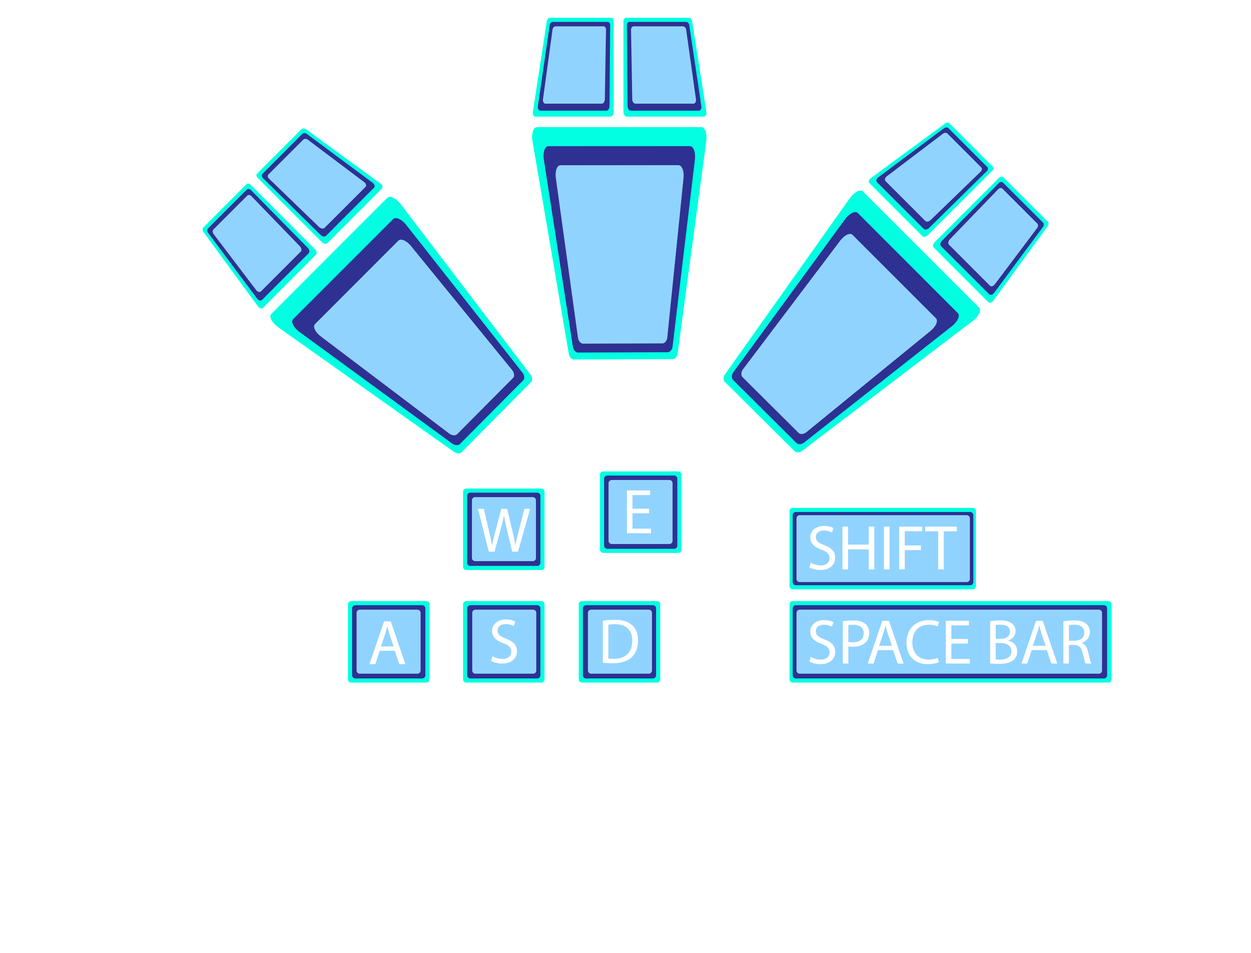
<style>
.page{position:relative;width:1251px;height:953px;background:#ffffff}
.page>*{position:absolute;margin:0}
.t1{font:63.4px "MyriadPro-Regular";color:#ffffff}
.t2{font:47.5px "MyriadPro-Regular"}
.t3{font:47.5px "MyriadPro-Regular";color:#ffffff}
</style>
<div class="page">
<p class="t1" style="left:627px;top:490px;width:24px;height:43px">E</p>
<p class="t2" style="left:631px;top:496px;width:18px;height:32px">E</p>
<p class="t1" style="left:478px;top:509px;width:52px;height:43px">W</p>
<p class="t1" style="left:809px;top:526px;width:148px;height:44px">SHIFT</p>
<p class="t1" style="left:370px;top:621px;width:35px;height:43px">A</p>
<p class="t1" style="left:370px;top:621px;width:35px;height:43px">A</p>
<p class="t3" style="left:374px;top:626px;width:27px;height:32px">A</p>
<p class="t3" style="left:374px;top:626px;width:27px;height:32px">A</p>
<p class="t1" style="left:491px;top:619px;width:26px;height:45px">S</p>
<p class="t1" style="left:603px;top:620px;width:35px;height:43px">D</p>
<p class="t1" style="left:809px;top:620px;width:283px;height:44px">SPACE BAR</p>
</div>
